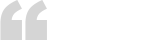
<style>
.page{position:relative;width:162px;height:40px;background:#ffffff}
.page>*{position:absolute;margin:0}
.t1{font:100.5px "Arial-Black";color:#d5d5d5}
</style>
<div class="page">
<p class="t1" style="left:0px;top:0px;width:47px;height:40px">“</p>
</div>
